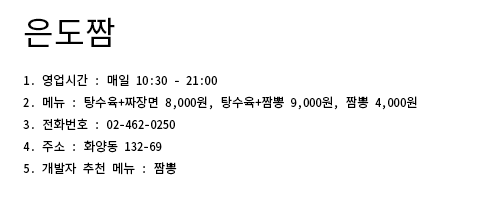
<style>
.page{position:relative;width:500px;height:220px;background:#ffffff}
.page>*{position:absolute;margin:0}
.t1{font:12.5px "NotoSansMonoCJKkr-Regular";color:#000000}
.t2{font:33.4px "NotoSansMonoCJKkr-Regular";color:#000000}
</style>
<div class="page">
<p class="t1" style="left:23px;top:17px;width:394px;height:158px"><span class="t2">은도짬<br></span>1. 영업시간 : 매일 10:30 - 21:00<br>2. 메뉴 : 탕수육+짜장면 8,000원, 탕수육+짬뽕 9,000원, 짬뽕 4,000원<br>3. 전화번호 : 02-462-0250<br>4. 주소 : 화양동 132-69<br>5. 개발자 추천 메뉴 : 짬뽕</p>
</div>
